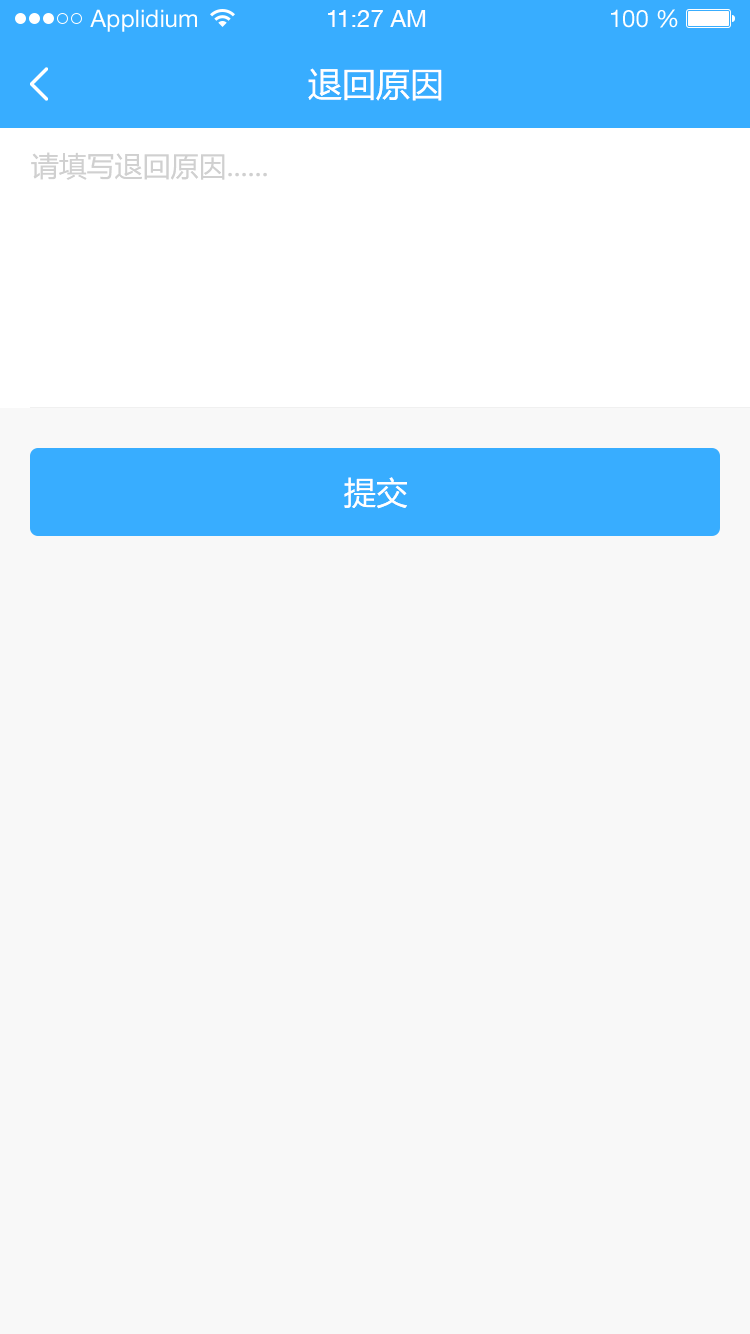
<style>
.page{position:relative;width:750px;height:1334px;background:#f8f8f8}
.page>*{position:absolute;margin:0}
.t1{font:24px "HelveticaNeueLTStd-Roman";color:#ffffff}
.t2{font:24px "HelveticaNeueCE-Roman";color:#ffffff}
.t3{font:34px "MicrosoftYaHei";color:#ffffff}
.t4{font:28px "MicrosoftYaHei";color:#d0d0d0}
.t5{font:32px "MicrosoftYaHei";color:#ffffff}
</style>
<div class="page">
<p class="t1" style="left:90px;top:9px;width:107px;height:23px">Applidium</p>
<p class="t2" style="left:328px;top:10px;width:98px;height:17px">11:27 AM</p>
<p class="t1" style="left:611px;top:9px;width:67px;height:19px">100 %</p>
<p class="t3" style="left:308px;top:68px;width:134px;height:33px">退回原因</p>
<p class="t4" style="left:31px;top:152px;width:236px;height:28px">请填写退回原因......</p>
<p class="t5" style="left:344px;top:477px;width:63px;height:32px">提交</p>
</div>
